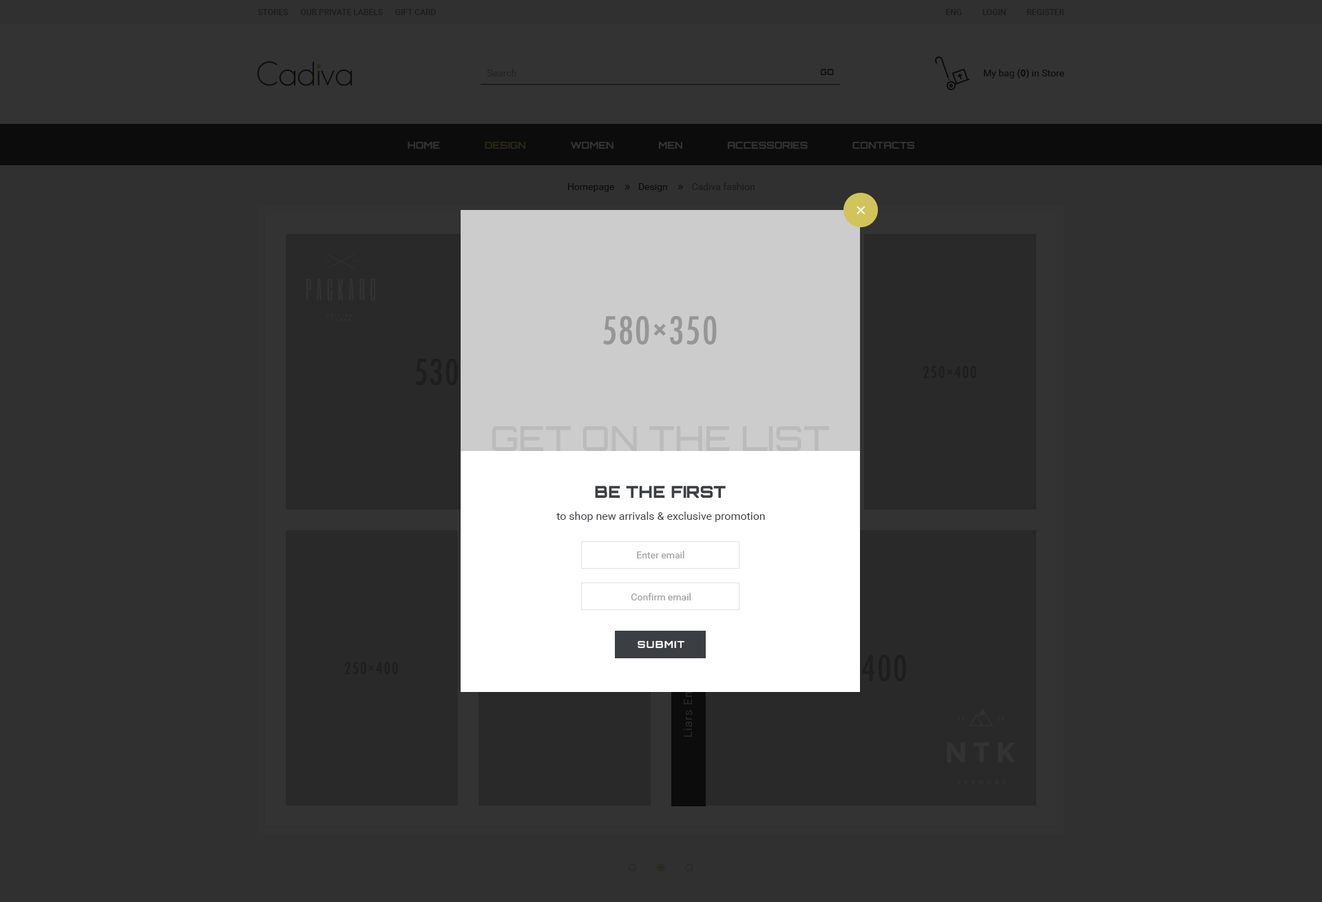
<style>
.page{position:relative;width:1322px;height:902px;background:#303030}
.page>*{position:absolute;margin:0}
.t1{font:8.3px "Roboto-Medium";color:#1b1c1d;text-transform:uppercase}
.t2{font:34.4px "Champagne&Limousines";color:#0c0c0d}
.t3{font:9.6px "Roboto-Regular";color:#232323}
.t4{font:8.3px "Orbitron-Bold";color:#0c0c0d;text-transform:uppercase}
.t5{font:9.6px "Roboto-Regular";color:#0c0c0d}
.t6{font:9.6px "Roboto-Bold";color:#0c0c0d}
.t7{font:9.6px "Orbitron-Bold";color:#333333;text-transform:uppercase}
.t8{font:34.4px "Orbitron-Medium";color:#bbbbbc;text-transform:uppercase}
.t9{font:16.5px "Orbitron-Black";color:#3b3e43;text-transform:uppercase}
.t10{font:11px "Roboto-Regular";color:#3b3e43}
.t11{font:9.6px "Roboto-Regular";color:#9c9d9f}
.t12{font:9.6px "Orbitron-Bold";letter-spacing:0.1em;color:#ffffff}
</style>
<div class="page">
<p class="t1" style="left:258px;top:9px;width:178px;height:6px">Stores      Our Private Labels      Gift Card</p>
<p class="t1" style="left:946px;top:9px;width:118px;height:6px">Eng          login          register</p>
<p class="t2" style="left:257px;top:61px;width:96px;height:25px">Cadiva</p>
<p class="t3" style="left:487px;top:69px;width:29px;height:7px">Search</p>
<p class="t4" style="left:820px;top:69px;width:14px;height:7px">go</p>
<p class="t5" style="left:984px;top:69px;width:80px;height:9px">My bag <span class="t6">(0)</span> in Store</p>
<p class="t7" style="left:408px;top:141px;width:506px;height:8px">Home               Design               Women               Men               Accessories               Contacts</p>
<p class="t5" style="left:568px;top:182px;width:187px;height:10px">Homepage          Design          Cadiva fashion</p>
<p class="t8" style="left:492px;top:426px;width:337px;height:25px">get on the list</p>
<p class="t9" style="left:595px;top:485px;width:131px;height:13px">be the first</p>
<p class="t10" style="left:556px;top:512px;width:209px;height:10px">to shop new arrivals &amp; exclusive promotion</p>
<p class="t11" style="left:637px;top:551px;width:47px;height:7px">Enter email</p>
<p class="t11" style="left:631px;top:593px;width:60px;height:7px">Confirm email</p>
<p class="t12" style="left:638px;top:640px;width:46px;height:9px">SUBMIT</p>
</div>
